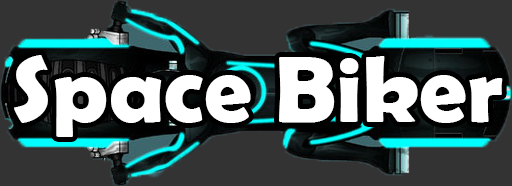
<style>
.page{position:relative;width:512px;height:186px;background:#333333}
.page>*{position:absolute;margin:0}
.t1{font:95px "BerlinSansFBDemi-Bold";color:#ffffff}
</style>
<div class="page">
<p class="t1" style="left:14px;top:55px;width:489px;height:82px">Space Biker</p>
</div>
